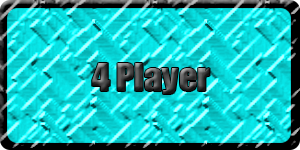
<style>
.page{position:relative;width:300px;height:150px}
.page>*{position:absolute;margin:0}
.t1{font:36px "Impact"}
</style>
<div class="page">
<p class="t1" style="left:92px;top:63px;width:118px;height:31px">4 Player</p>
</div>
